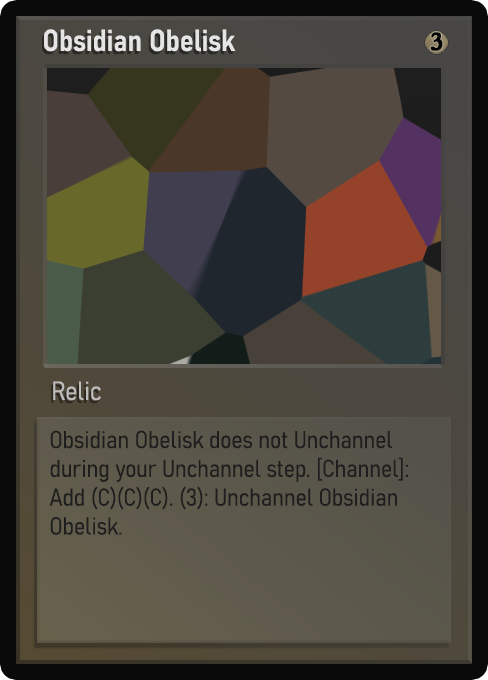
<style>
.page{position:relative;width:488px;height:680px}
.page>*{position:absolute;margin:0}
.t1{font:30px "Bahnschrift-SemiBoldSemiCondensed";color:#f2f2f2;font-weight:bold}
.t2{font:25px "WTRRoycroft";color:#000000;font-weight:bold;scale:1.09 1}
.t3{font:26px "Bahnschrift-LightSemiCondensed";color:#c8c8c8;font-weight:bold}
.t4{font:24px "Bahnschrift-LightSemiCondensed";color:#1e1e1e;font-weight:bold}
</style>
<div class="page">
<p class="t1" style="left:44px;top:29px;width:192px;height:23px;opacity:0.9">Obsidian Obelisk</p>
<p class="t2" style="left:430px;top:32px;width:13px;height:19px">3</p>
<p class="t3" style="left:53px;top:381px;width:48px;height:20px;opacity:0.9">Relic</p>
<p class="t4" style="left:49px;top:430px;width:359px;height:105px">Obsidian Obelisk does not Unchannel during your Unchannel step. [Channel]: Add (C)(C)(C). (3): Unchannel Obsidian Obelisk.</p>
</div>
